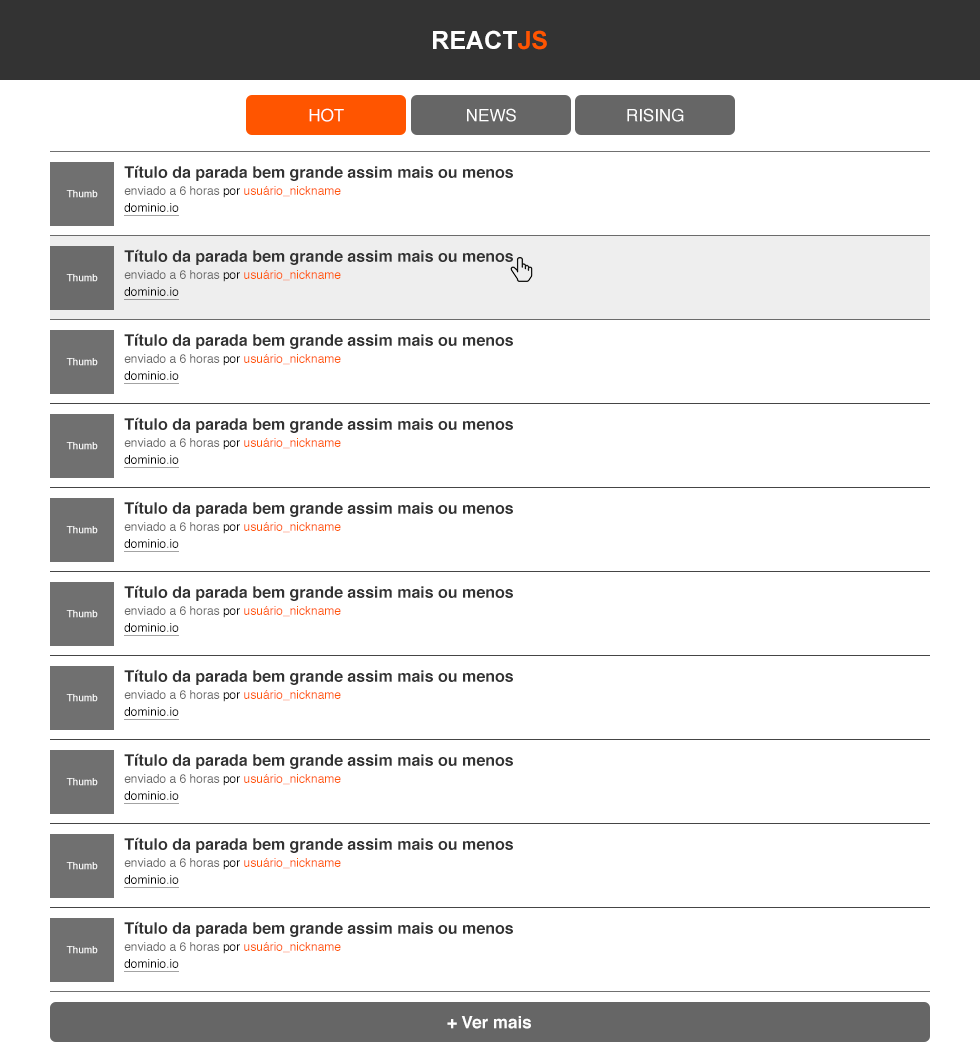
<style>
.page{position:relative;width:980px;height:1059px;background:#ffffff}
.page>*{position:absolute;margin:0}
.t1{font:25px "Arial-BoldMT";color:#ffffff}
.t2{font:25px "Arial-BoldMT";color:#ff5500}
.t3{font:17px "Helvetica";color:#ffffff}
.t4{font:16px/17px "Helvetica-Bold";color:#333333}
.t5{font:12px/17px "Helvetica";color:#666666}
.t6{font:12px/17px "Helvetica";color:#000000}
.t7{font:12px/17px "Helvetica";color:#ff5500}
.t8{font:12px/17px "Helvetica";color:#000000;text-decoration:underline}
.t9{font:10px "Helvetica";color:#ffffff}
.t10{font:17px "Helvetica-Bold";color:#ffffff}
</style>
<div class="page">
<p class="t1" style="left:433px;top:30px;width:114px;height:20px">REACT<span class="t2">JS</span></p>
<p class="t3" style="left:309px;top:108px;width:35px;height:14px">HOT</p>
<p class="t3" style="left:467px;top:108px;width:49px;height:14px">NEWS</p>
<p class="t3" style="left:627px;top:108px;width:57px;height:14px">RISING</p>
<p class="t4" style="left:124px;top:165px;width:389px;height:51px">Título da parada bem grande assim mais ou menos<br><span class="t5">enviado a 6 horas </span><span class="t6">por </span><span class="t7">usuário_nickname<br></span><span class="t8">dominio.io</span></p>
<p class="t9" style="left:66px;top:190px;width:32px;height:8px">Thumb</p>
<p class="t4" style="left:124px;top:249px;width:389px;height:51px">Título da parada bem grande assim mais ou menos<br><span class="t5">enviado a 6 horas </span><span class="t6">por </span><span class="t7">usuário_nickname<br></span><span class="t8">dominio.io</span></p>
<p class="t9" style="left:66px;top:274px;width:32px;height:8px">Thumb</p>
<p class="t4" style="left:124px;top:333px;width:389px;height:51px">Título da parada bem grande assim mais ou menos<br><span class="t5">enviado a 6 horas </span><span class="t6">por </span><span class="t7">usuário_nickname<br></span><span class="t8">dominio.io</span></p>
<p class="t9" style="left:66px;top:358px;width:32px;height:8px">Thumb</p>
<p class="t4" style="left:124px;top:417px;width:389px;height:51px">Título da parada bem grande assim mais ou menos<br><span class="t5">enviado a 6 horas </span><span class="t6">por </span><span class="t7">usuário_nickname<br></span><span class="t8">dominio.io</span></p>
<p class="t9" style="left:66px;top:442px;width:32px;height:8px">Thumb</p>
<p class="t4" style="left:124px;top:501px;width:389px;height:51px">Título da parada bem grande assim mais ou menos<br><span class="t5">enviado a 6 horas </span><span class="t6">por </span><span class="t7">usuário_nickname<br></span><span class="t8">dominio.io</span></p>
<p class="t9" style="left:66px;top:526px;width:32px;height:8px">Thumb</p>
<p class="t4" style="left:124px;top:585px;width:389px;height:51px">Título da parada bem grande assim mais ou menos<br><span class="t5">enviado a 6 horas </span><span class="t6">por </span><span class="t7">usuário_nickname<br></span><span class="t8">dominio.io</span></p>
<p class="t9" style="left:66px;top:610px;width:32px;height:8px">Thumb</p>
<p class="t4" style="left:124px;top:669px;width:389px;height:51px">Título da parada bem grande assim mais ou menos<br><span class="t5">enviado a 6 horas </span><span class="t6">por </span><span class="t7">usuário_nickname<br></span><span class="t8">dominio.io</span></p>
<p class="t9" style="left:66px;top:694px;width:32px;height:8px">Thumb</p>
<p class="t4" style="left:124px;top:753px;width:389px;height:51px">Título da parada bem grande assim mais ou menos<br><span class="t5">enviado a 6 horas </span><span class="t6">por </span><span class="t7">usuário_nickname<br></span><span class="t8">dominio.io</span></p>
<p class="t9" style="left:66px;top:778px;width:32px;height:8px">Thumb</p>
<p class="t4" style="left:124px;top:837px;width:389px;height:51px">Título da parada bem grande assim mais ou menos<br><span class="t5">enviado a 6 horas </span><span class="t6">por </span><span class="t7">usuário_nickname<br></span><span class="t8">dominio.io</span></p>
<p class="t9" style="left:66px;top:862px;width:32px;height:8px">Thumb</p>
<p class="t4" style="left:124px;top:921px;width:389px;height:51px">Título da parada bem grande assim mais ou menos<br><span class="t5">enviado a 6 horas </span><span class="t6">por </span><span class="t7">usuário_nickname<br></span><span class="t8">dominio.io</span></p>
<p class="t9" style="left:66px;top:946px;width:32px;height:8px">Thumb</p>
<p class="t10" style="left:447px;top:1016px;width:84px;height:13px">+ Ver mais</p>
</div>
